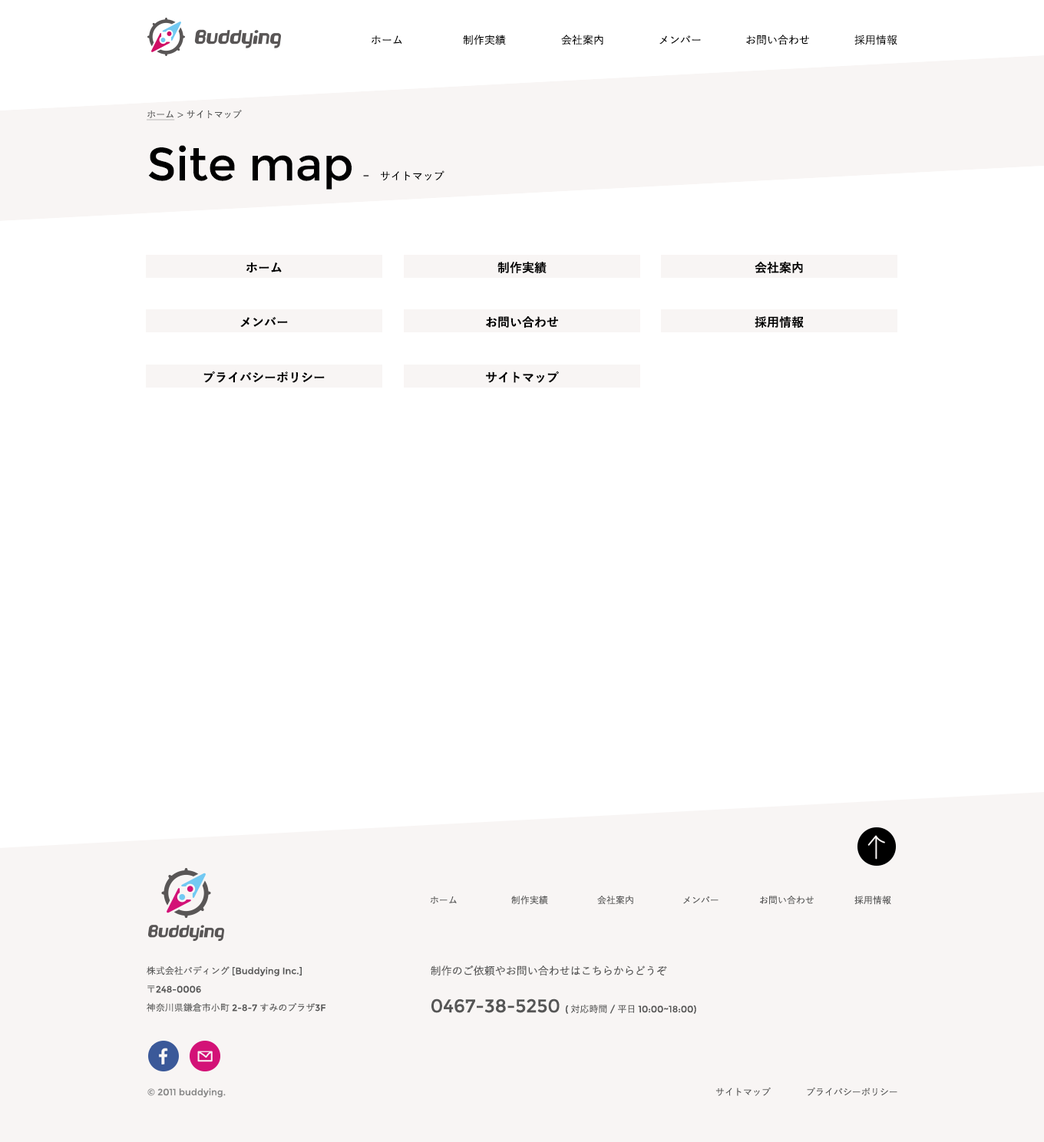
<style>
.page{position:relative;width:1044px;height:1142px;background:#ffffff}
.page>*{position:absolute;margin:0}
.t1{font:10.7px "YuGo-Medium";color:#000000}
.t2{font:9.2px "YuGo-Medium";color:#565656}
.t3{font:9.2px "YuGo-Medium";color:#565656;text-decoration:underline}
.t4{font:46.1px "Montserrat-Regular";color:#000000}
.t5{font:10.7px "Montserrat-Regular";color:#000000}
.t6{font:12.3px "YuGo-Bold";color:#000000}
.t7{font:9.2px/18.4px "Montserrat-Regular";color:#565656}
.t8{font:9.2px/18.4px "YuGo-Medium";color:#565656}
.t9{font:10.7px/31.5px "YuGo-Medium";color:#565656}
.t10{font:18.4px/31.5px "Montserrat-Regular";color:#565656}
.t11{font:9.2px/31.5px "Montserrat-Regular";color:#565656}
.t12{font:9.2px/31.5px "YuGo-Medium";color:#565656}
.t13{font:9.2px "Montserrat-Regular";color:#888888}
</style>
<div class="page">
<p class="t1" style="left:372px;top:35px;width:30px;height:10px">ホーム</p>
<p class="t1" style="left:463px;top:35px;width:43px;height:10px">制作実績</p>
<p class="t1" style="left:561px;top:35px;width:42px;height:10px">会社案内</p>
<p class="t1" style="left:659px;top:35px;width:42px;height:10px">メンバー</p>
<p class="t1" style="left:746px;top:35px;width:63px;height:10px">お問い合わせ</p>
<p class="t1" style="left:854px;top:35px;width:43px;height:10px">採用情報</p>
<p class="t2" style="left:147px;top:110px;width:95px;height:11px"><span class="t3">ホーム</span> &gt; サイトマップ</p>
<p class="t4" style="left:148px;top:145px;width:204px;height:45px">Site map</p>
<p class="t1" style="left:363px;top:170px;width:81px;height:10px"><span class="t5">−</span>　サイトマップ</p>
<p class="t6" style="left:246px;top:263px;width:36px;height:10px">ホーム</p>
<p class="t6" style="left:497px;top:262px;width:50px;height:11px">制作実績</p>
<p class="t6" style="left:755px;top:262px;width:48px;height:11px">会社案内</p>
<p class="t6" style="left:240px;top:317px;width:48px;height:10px">メンバー</p>
<p class="t6" style="left:486px;top:316px;width:72px;height:12px">お問い合わせ</p>
<p class="t6" style="left:755px;top:316px;width:49px;height:12px">採用情報</p>
<p class="t6" style="left:203px;top:371px;width:122px;height:12px">プライバシーポリシー</p>
<p class="t6" style="left:486px;top:371px;width:73px;height:12px">サイトマップ</p>
<p class="t2" style="left:430px;top:897px;width:27px;height:7px">ホーム</p>
<p class="t2" style="left:511px;top:896px;width:37px;height:9px">制作実績</p>
<p class="t2" style="left:597px;top:896px;width:36px;height:9px">会社案内</p>
<p class="t2" style="left:683px;top:896px;width:35px;height:8px">メンバー</p>
<p class="t2" style="left:759px;top:896px;width:55px;height:9px">お問い合わせ</p>
<p class="t2" style="left:854px;top:896px;width:37px;height:9px">採用情報</p>
<p class="t7" style="left:147px;top:966px;width:179px;height:46px"><span class="t8">株式会社バディング</span> [Buddying Inc.]<br><span class="t8">〒</span>248-0006<br><span class="t8">神奈川県鎌倉市小町</span> 2-8-7 <span class="t8">すみのプラザ</span>3F</p>
<p class="t9" style="left:431px;top:966px;width:265px;height:48px">制作のご依頼やお問い合わせはこちらからどうぞ<br><span class="t10">0467-38-5250 </span><span class="t11">(</span><span class="t12">対応時間</span><span class="t11">/</span><span class="t12">平日</span><span class="t11">10:00~18:00)</span></p>
<p class="t13" style="left:147px;top:1088px;width:79px;height:10px">© 2011 buddying.</p>
<p class="t2" style="left:715px;top:1088px;width:56px;height:8px">サイトマップ</p>
<p class="t2" style="left:807px;top:1088px;width:90px;height:8px">プライバシーポリシー</p>
</div>
